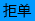
<style>
.page{position:relative;width:35px;height:21px;background:#0099ff}
.page>*{position:absolute;margin:0}
.t1{font:15px "STXihei";letter-spacing:-0.045em;color:#000000}
</style>
<div class="page">
<p class="t1" style="left:3px;top:3px;width:29px;height:15px">拒单</p>
</div>
